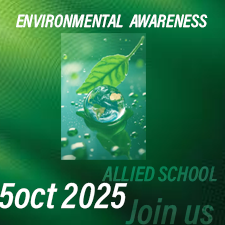
<style>
.page{position:relative;width:225px;height:225px}
.page>*{position:absolute;margin:0}
.t1{font:18px "AcuminConcept-CondensedSemiboldItalic";color:#ffffff}
.t2{font:21.1px "AcuminConcept-CondensedSemiboldItalic";color:#137a52}
.t3{font:37.6px "AcuminConcept-CondensedSemiboldItalic";color:#ffffff}
.t4{font:36.3px "AcuminConcept-CondensedSemiboldItalic";color:#1d5a42}
</style>
<div class="page">
<p class="t1" style="left:16px;top:14px;width:192px;height:14px">ENVIRONMENTAL  AWARENESS</p>
<p class="t2" style="left:102px;top:166px;width:115px;height:16px">ALLIED SCHOOL</p>
<p class="t3" style="left:0px;top:182px;width:128px;height:27px">5oct 2025</p>
<p class="t4" style="left:125px;top:198px;width:89px;height:27px">Join us</p>
</div>
